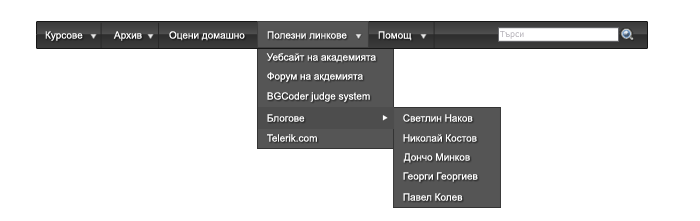
<style>
.page{position:relative;width:700px;height:221px;background:#ffffff}
.page>*{position:absolute;margin:0}
.t1{font:10px "ArialMT";color:#ffffff}
.t2{font:8.2px "Verdana";color:#b3b0b7}
</style>
<div class="page">
<p class="t1" style="left:45px;top:31px;width:38px;height:10px">Курсове</p>
<p class="t1" style="left:113px;top:31px;width:29px;height:10px">Архив</p>
<p class="t1" style="left:169px;top:31px;width:76px;height:10px">Оцени домашно</p>
<p class="t1" style="left:267px;top:31px;width:80px;height:8px">Полезни линкове</p>
<p class="t1" style="left:378px;top:31px;width:34px;height:10px">Помощ</p>
<p class="t2" style="left:500px;top:31px;width:24px;height:8px">Търси</p>
<p class="t1" style="left:266px;top:53px;width:110px;height:10px">Уебсайт на академията</p>
<p class="t1" style="left:267px;top:72px;width:96px;height:10px">Форум на акдемията</p>
<p class="t1" style="left:267px;top:92px;width:103px;height:10px">BGCoder judge system</p>
<p class="t1" style="left:267px;top:114px;width:38px;height:8px">Блогове</p>
<p class="t1" style="left:403px;top:114px;width:70px;height:8px">Светлин Наков</p>
<p class="t1" style="left:267px;top:134px;width:50px;height:8px">Telerik.com</p>
<p class="t1" style="left:403px;top:134px;width:74px;height:8px">Николай Костов</p>
<p class="t1" style="left:403px;top:153px;width:67px;height:10px">Дончо Минков</p>
<p class="t1" style="left:403px;top:172px;width:75px;height:10px">Георги Георгиев</p>
<p class="t1" style="left:403px;top:193px;width:60px;height:8px">Павел Колев</p>
</div>
